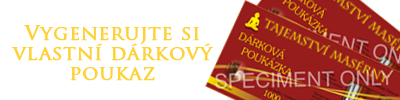
<style>
.page{position:relative;width:400px;height:100px;background:#ffffff}
.page>*{position:absolute;margin:0}
.t1{font:20px/20px "TrajanPro-Regular";letter-spacing:0.02em;color:#fed136;font-weight:bold}
</style>
<div class="page">
<p class="t1" style="left:12px;top:25px;width:202px;height:56px;text-align:center">Vygenerujte si<br> vlastní dárkový <br>poukaz</p>
</div>
